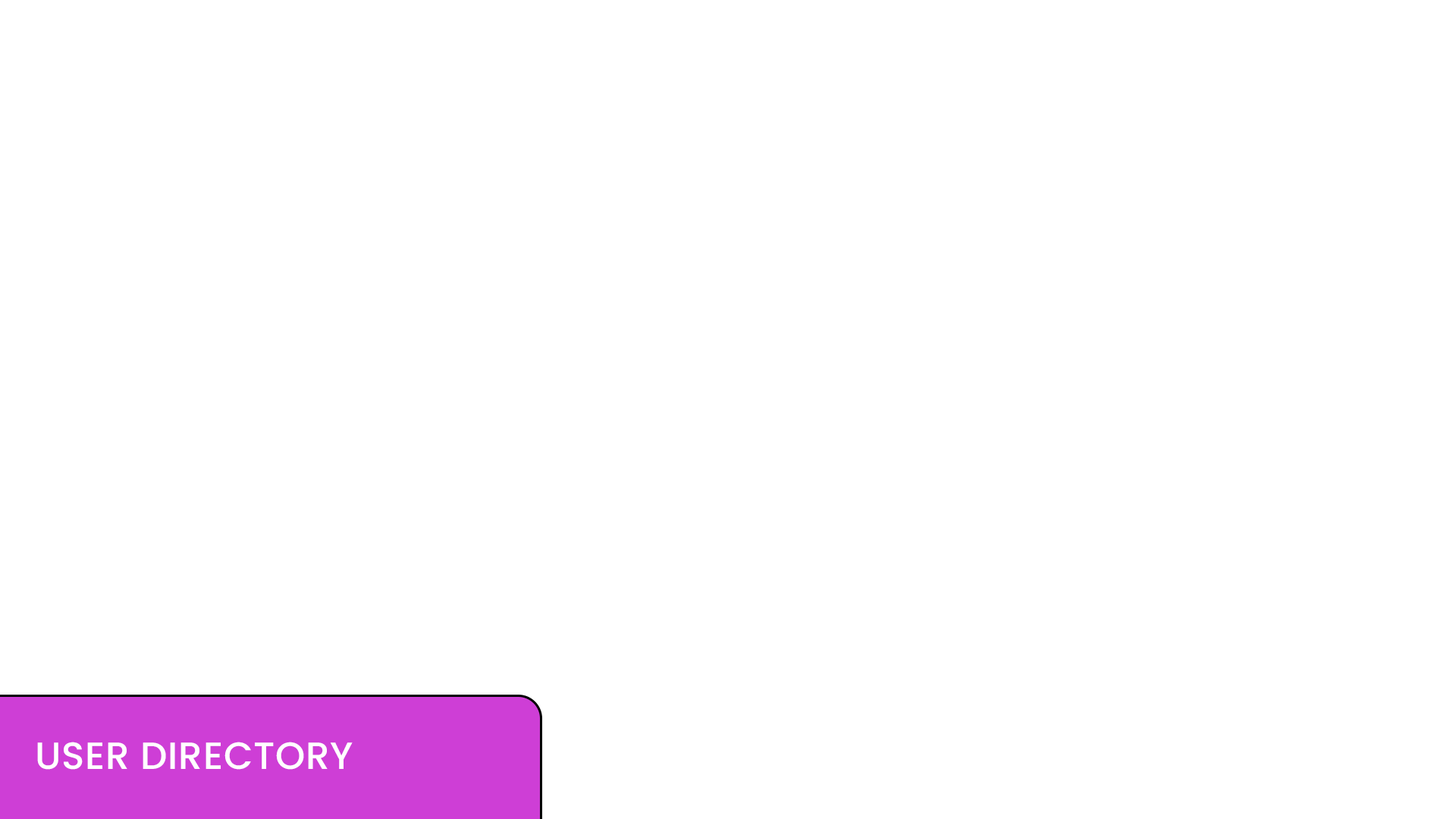
<style>
.page{position:relative;width:1456px;height:819px;background:#ffffff}
.page>*{position:absolute;margin:0}
.t1{font:37.9px "Poppins-Medium";letter-spacing:0.015em;color:#ffffff}
</style>
<div class="page">
<p class="t1" style="left:37px;top:742px;width:316px;height:28px">USER DIRECTORY</p>
</div>
